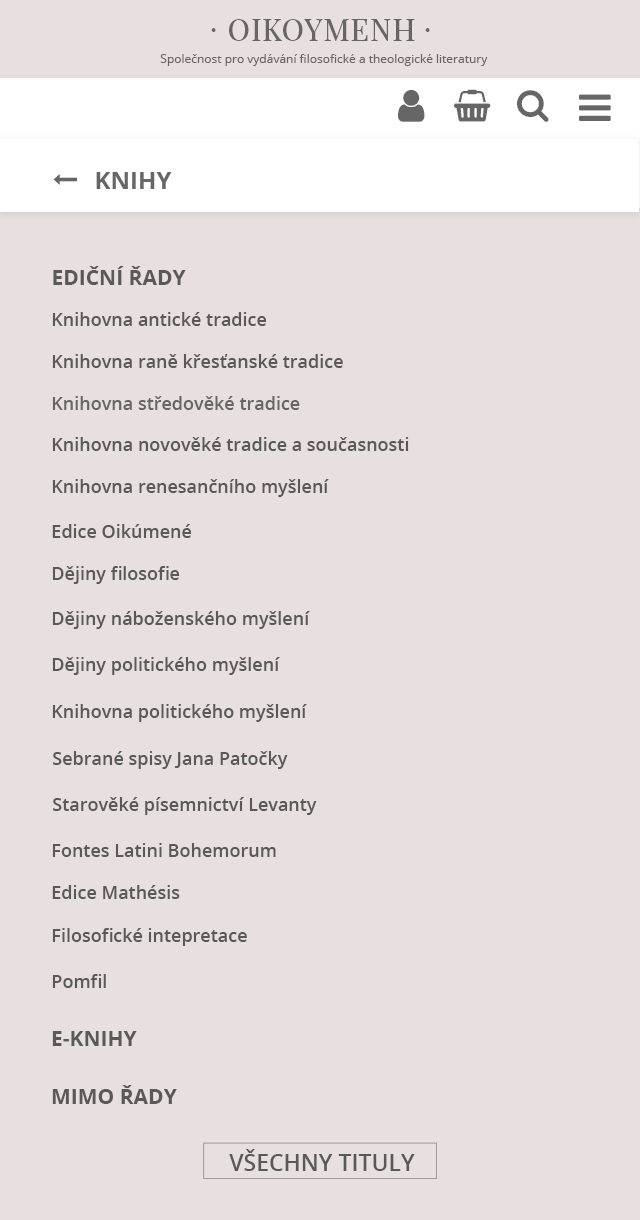
<style>
.page{position:relative;width:640px;height:1220px;background:#e8e0de}
.page>*{position:absolute;margin:0}
.t1{font:30px "PlayfairDisplaySC-Regular";letter-spacing:0.04em;color:#666666}
.t2{font:30px "PlayfairDisplay-Regular";letter-spacing:0.04em;color:#666666}
.t3{font:12px "OpenSans";color:#666666}
.t4{font:24px "OpenSans-Bold";color:#666666;text-transform:uppercase}
.t5{font:21px "OpenSans-Bold";color:#595959;text-transform:uppercase}
.t6{font:18px "OpenSans-Semibold";color:#595959}
.t7{font:18px "OpenSans-Semibold";color:#666666}
.t8{font:23px "OpenSans-Semibold";color:#595959;text-transform:uppercase}
</style>
<div class="page">
<p class="t1" style="left:211px;top:28px;width:5px;height:4px">·</p>
<p class="t2" style="left:229px;top:19px;width:186px;height:22px">OIKOYMENH</p>
<p class="t1" style="left:425px;top:28px;width:5px;height:4px">·</p>
<p class="t3" style="left:160px;top:54px;width:328px;height:12px">Společnost pro vydávání filosofické a theologické literatury</p>
<p class="t4" style="left:96px;top:172px;width:76px;height:17px">Knihy</p>
<p class="t5" style="left:53px;top:266px;width:133px;height:19px">ediční řady</p>
<p class="t6" style="left:52px;top:312px;width:215px;height:14px">Knihovna antické tradice</p>
<p class="t6" style="left:52px;top:354px;width:291px;height:14px">Knihovna raně křesťanské tradice</p>
<p class="t7" style="left:52px;top:396px;width:248px;height:14px">Knihovna středověké tradice</p>
<p class="t6" style="left:52px;top:437px;width:357px;height:14px">Knihovna novověké tradice a současnosti</p>
<p class="t6" style="left:52px;top:479px;width:277px;height:18px">Knihovna renesančního myšlení</p>
<p class="t6" style="left:52px;top:524px;width:140px;height:14px">Edice Oikúmené</p>
<p class="t6" style="left:52px;top:566px;width:128px;height:18px">Dějiny filosofie</p>
<p class="t6" style="left:52px;top:611px;width:258px;height:18px">Dějiny náboženského myšlení</p>
<p class="t6" style="left:52px;top:657px;width:228px;height:18px">Dějiny politického myšlení</p>
<p class="t6" style="left:52px;top:704px;width:255px;height:18px">Knihovna politického myšlení</p>
<p class="t6" style="left:53px;top:751px;width:235px;height:18px">Sebrané spisy Jana Patočky</p>
<p class="t6" style="left:53px;top:797px;width:264px;height:18px">Starověké písemnictví Levanty</p>
<p class="t6" style="left:52px;top:843px;width:224px;height:14px">Fontes Latini Bohemorum</p>
<p class="t6" style="left:52px;top:885px;width:128px;height:14px">Edice Mathésis</p>
<p class="t6" style="left:52px;top:928px;width:195px;height:18px">Filosofické intepretace</p>
<p class="t6" style="left:52px;top:974px;width:54px;height:14px">Pomfil</p>
<p class="t5" style="left:52px;top:1031px;width:85px;height:15px">e-knihy</p>
<p class="t5" style="left:52px;top:1085px;width:125px;height:19px">mimo řady</p>
<p class="t8" style="left:229px;top:1149px;width:186px;height:22px">VŠECHNY TITULY</p>
</div>
